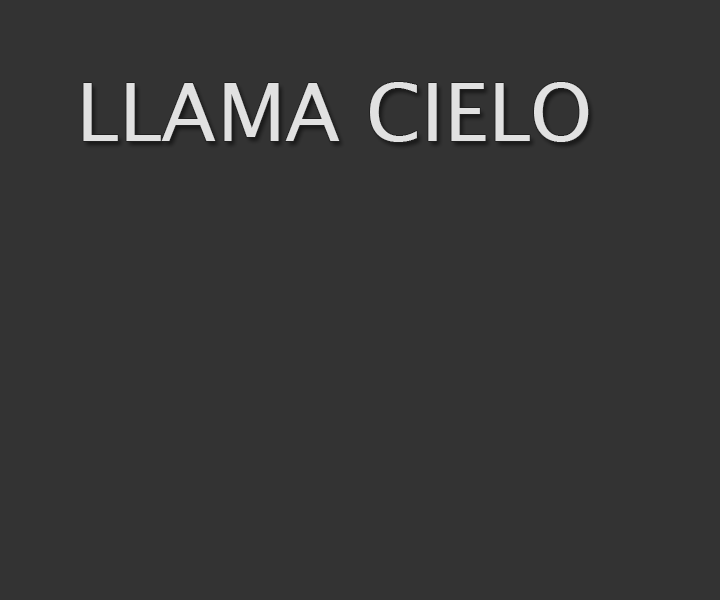
<style>
.page{position:relative;width:720px;height:600px;background:#333333}
.page>*{position:absolute;margin:0}
.t1{font:80px "LucidaSansUnicode";color:#e1e1e1}
</style>
<div class="page">
<p class="t1" style="left:83px;top:82px;width:506px;height:60px">LLAMA CIELO</p>
</div>
